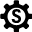
<style>
.page{position:relative;width:32px;height:32px;background:#ffffff}
.page>*{position:absolute;margin:0}
.t1{font:16.6px "Thonburi-Bold";color:#000000;font-weight:bold}
</style>
<div class="page">
<p class="t1" style="left:11px;top:9px;width:10px;height:14px">S</p>
</div>
